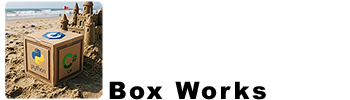
<style>
.page{position:relative;width:350px;height:100px;background:#ffffff}
.page>*{position:absolute;margin:0}
.t1{font:24px "Arial-Black";letter-spacing:0.1em;color:#000000}
</style>
<div class="page">
<p class="t1" style="left:109px;top:81px;width:157px;height:19px">Box Works</p>
</div>
